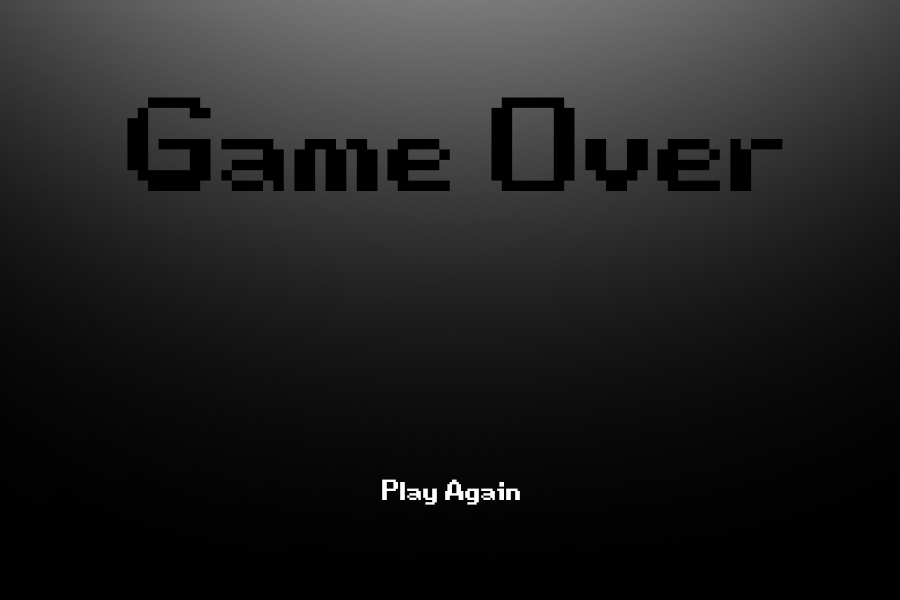
<style>
.page{position:relative;width:900px;height:600px}
.page>*{position:absolute;margin:0}
.t1{font:332.6px "Game-Over";color:#000000}
.t2{font:72px "Game-Over";color:#ffffff}
</style>
<div class="page">
<p class="t1" style="left:127px;top:97px;width:656px;height:94px">Game Over</p>
<p class="t2" style="left:382px;top:479px;width:138px;height:26px">Play Again</p>
</div>
